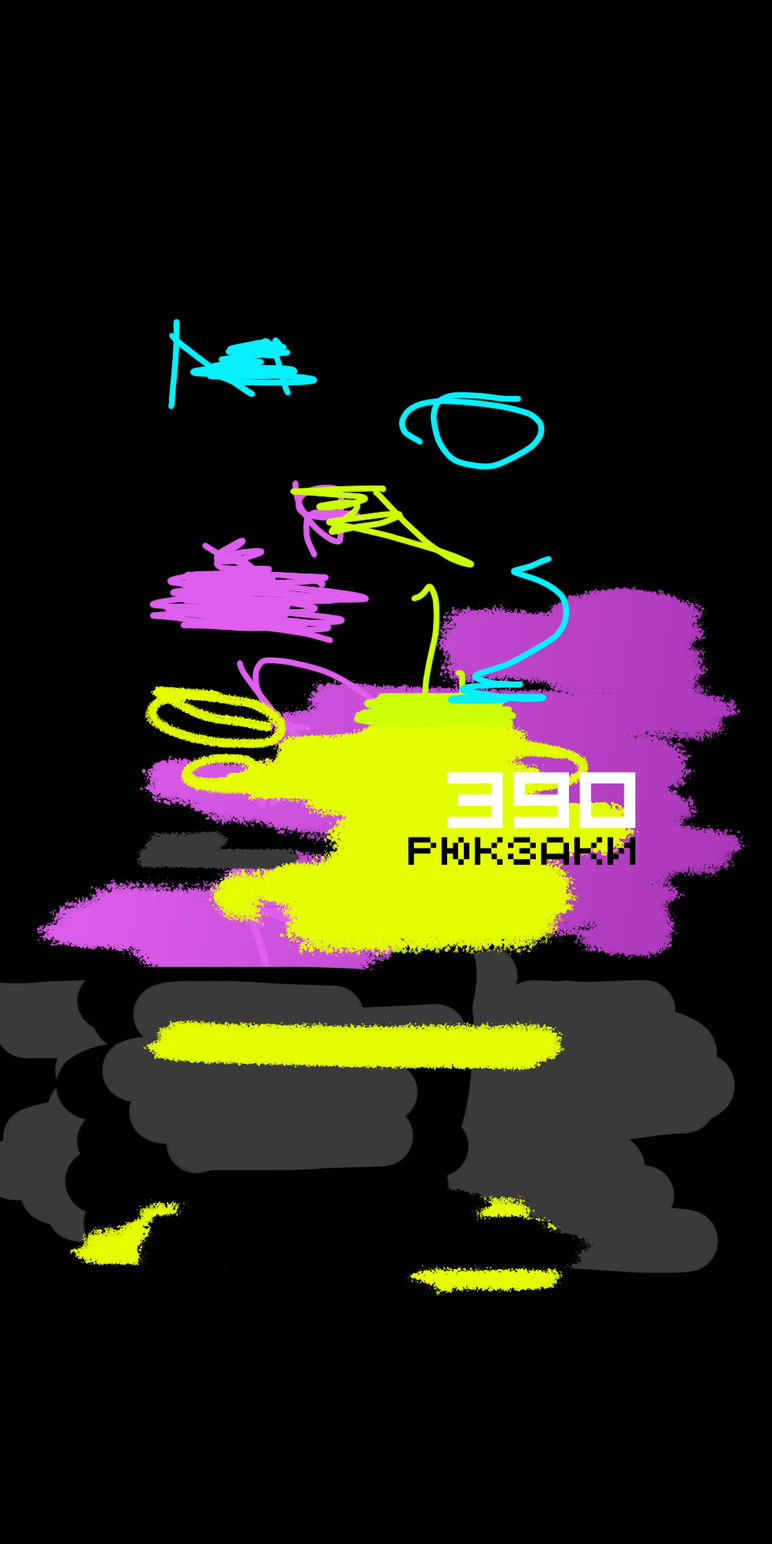
<style>
.page{position:relative;width:772px;height:1544px;background:#000000}
.page>*{position:absolute;margin:0}
.t1{font:55.6px "QuinqueFive";color:#ffffff}
.t2{font:27.8px "QuinqueFive";color:#000000}
</style>
<div class="page">
<p class="t1" style="left:447px;top:772px;width:188px;height:57px">390</p>
<p class="t2" style="left:408px;top:837px;width:227px;height:29px">рюкзаки</p>
</div>
